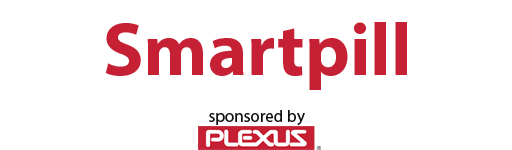
<style>
.page{position:relative;width:512px;height:150px;background:#ffffff}
.page>*{position:absolute;margin:0}
.t1{font:75px "MyriadPro-Bold";color:#c52033}
.t2{font:17px "MyriadPro-Regular";color:#111111}
</style>
<div class="page">
<p class="t1" style="left:105px;top:22px;width:302px;height:68px">Smartpill</p>
<p class="t2" style="left:209px;top:110px;width:96px;height:16px">sponsored by</p>
</div>
